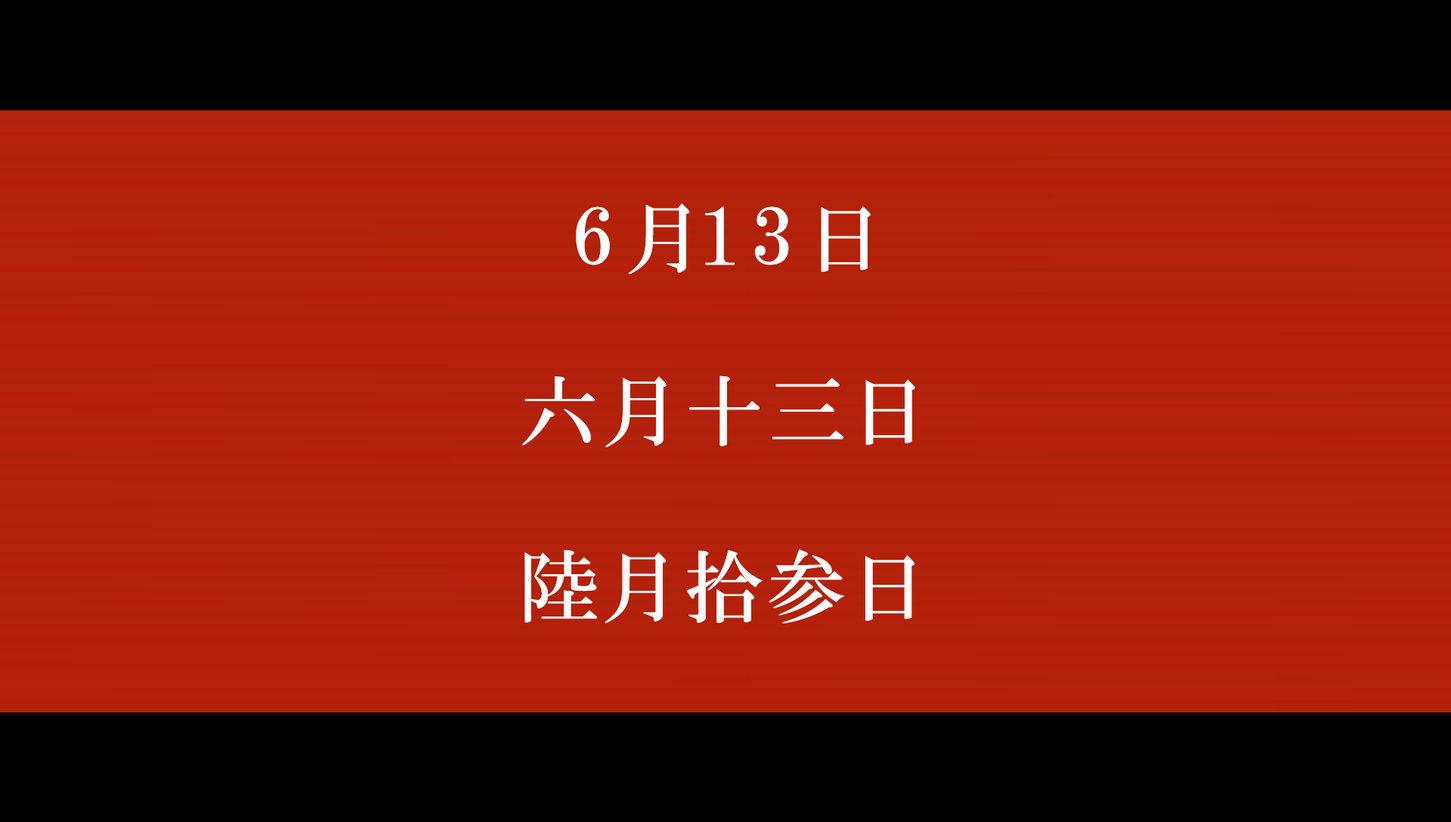
<style>
.page{position:relative;width:1451px;height:822px;background:#000000}
.page>*{position:absolute;margin:0}
.t1{font:78.6px "HGMinchoB";letter-spacing:0.17em;color:#fffeff}
.t2{font:78.6px "HGMinchoB";letter-spacing:-0.05em;color:#fffeff}
.t3{font:78.6px "HGMinchoB";letter-spacing:0.05em;color:#fffeff}
</style>
<div class="page">
<p class="t1" style="left:576px;top:203px;width:294px;height:71px">6<span class="t2">月</span>13日</p>
<p class="t3" style="left:522px;top:375px;width:393px;height:72px">六月十三日</p>
<p class="t3" style="left:524px;top:549px;width:390px;height:74px">陸月拾参日</p>
</div>
